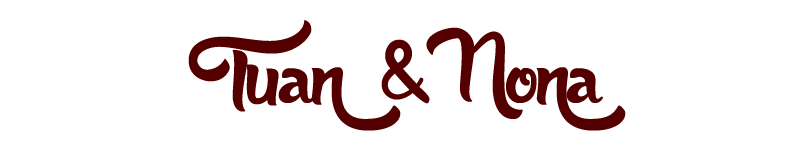
<style>
.page{position:relative;width:800px;height:150px;background:#ffffff}
.page>*{position:absolute;margin:0}
.t1{font:150px "AnabelleScript";color:#550000}
.t2{font:106.3px "AnabelleScript";color:#550000}
</style>
<div class="page">
<p class="t1" style="left:188px;top:20px;width:213px;height:111px">Tuan</p>
<p class="t1" style="left:426px;top:27px;width:200px;height:104px">Nona</p>
<p class="t2" style="left:381px;top:39px;width:49px;height:65px">&amp;</p>
</div>
